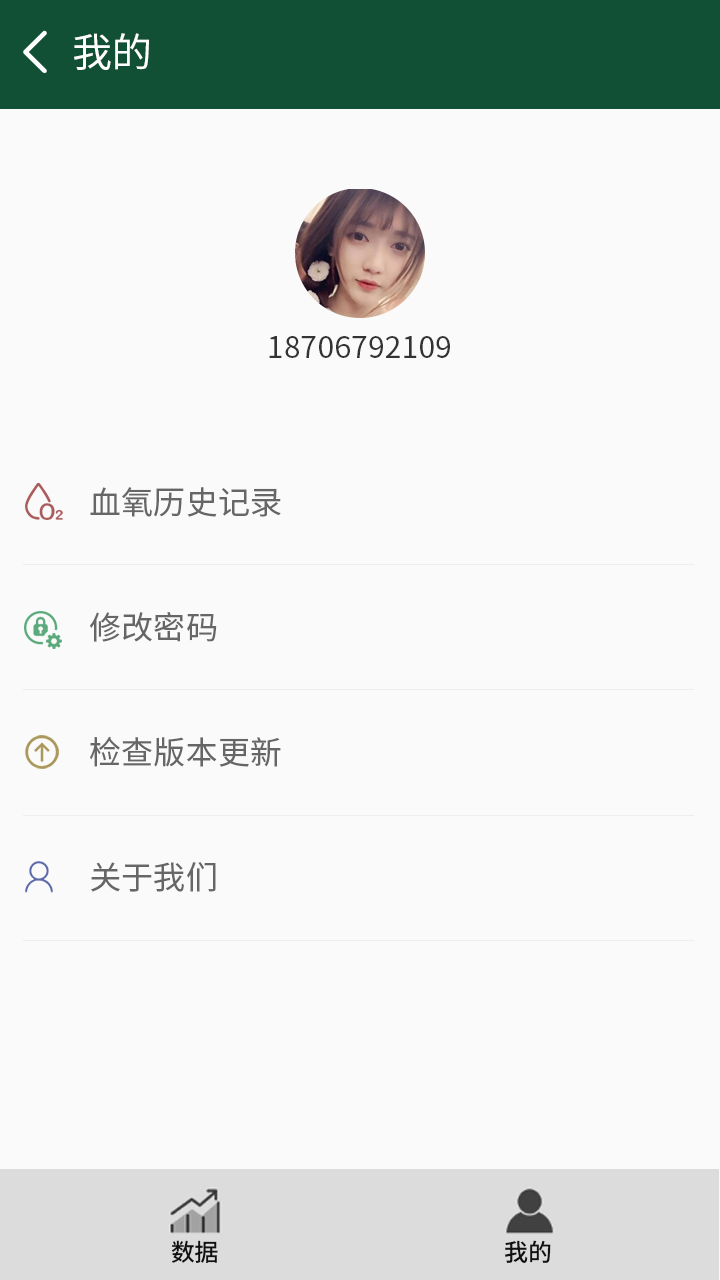
<style>
.page{position:relative;width:720px;height:1280px;background:#fafafa}
.page>*{position:absolute;margin:0}
.t1{font:40px "SourceHanSansCN-Regular";letter-spacing:0.005em;color:#ffffff;text-transform:uppercase}
.t2{font:30px "SourceHanSansCN-Regular";letter-spacing:0.005em;color:#333333;text-transform:uppercase}
.t3{font:32px/125px "SourceHanSansCN-Regular";letter-spacing:0.005em;color:#666666;text-transform:uppercase}
.t4{font:24px "SourceHanSansCN-Medium";letter-spacing:0.005em;color:#111111}
</style>
<div class="page">
<p class="t1" style="left:74px;top:33px;width:75px;height:37px">我的</p>
<p class="t2" style="left:269px;top:336px;width:181px;height:22px">18706792109</p>
<p class="t3" style="left:90px;top:487px;width:191px;height:405px">血氧历史记录<br>修改密码<br>检查版本更新<br>关于我们</p>
<p class="t4" style="left:171px;top:1240px;width:47px;height:23px">数据</p>
<p class="t4" style="left:504px;top:1240px;width:47px;height:23px">我的</p>
</div>
